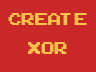
<style>
.page{position:relative;width:96px;height:72px;background:#ca2828}
.page>*{position:absolute;margin:0}
.t1{font:24px "8bitemul8r";color:#ffc445}
</style>
<div class="page">
<p class="t1" style="left:8px;top:13px;width:79px;height:41px;text-align:center">Create<br>xor</p>
</div>
